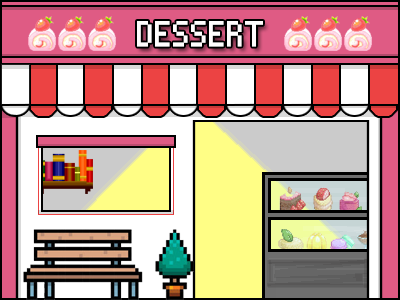
<style>
.page{position:relative;width:400px;height:300px}
.page>*{position:absolute;margin:0}
.t1{font:36px "PixelMplus10-Regular";color:#fffefe}
</style>
<div class="page">
<p class="t1" style="left:137px;top:21px;width:126px;height:26px">DESSERT</p>
</div>
